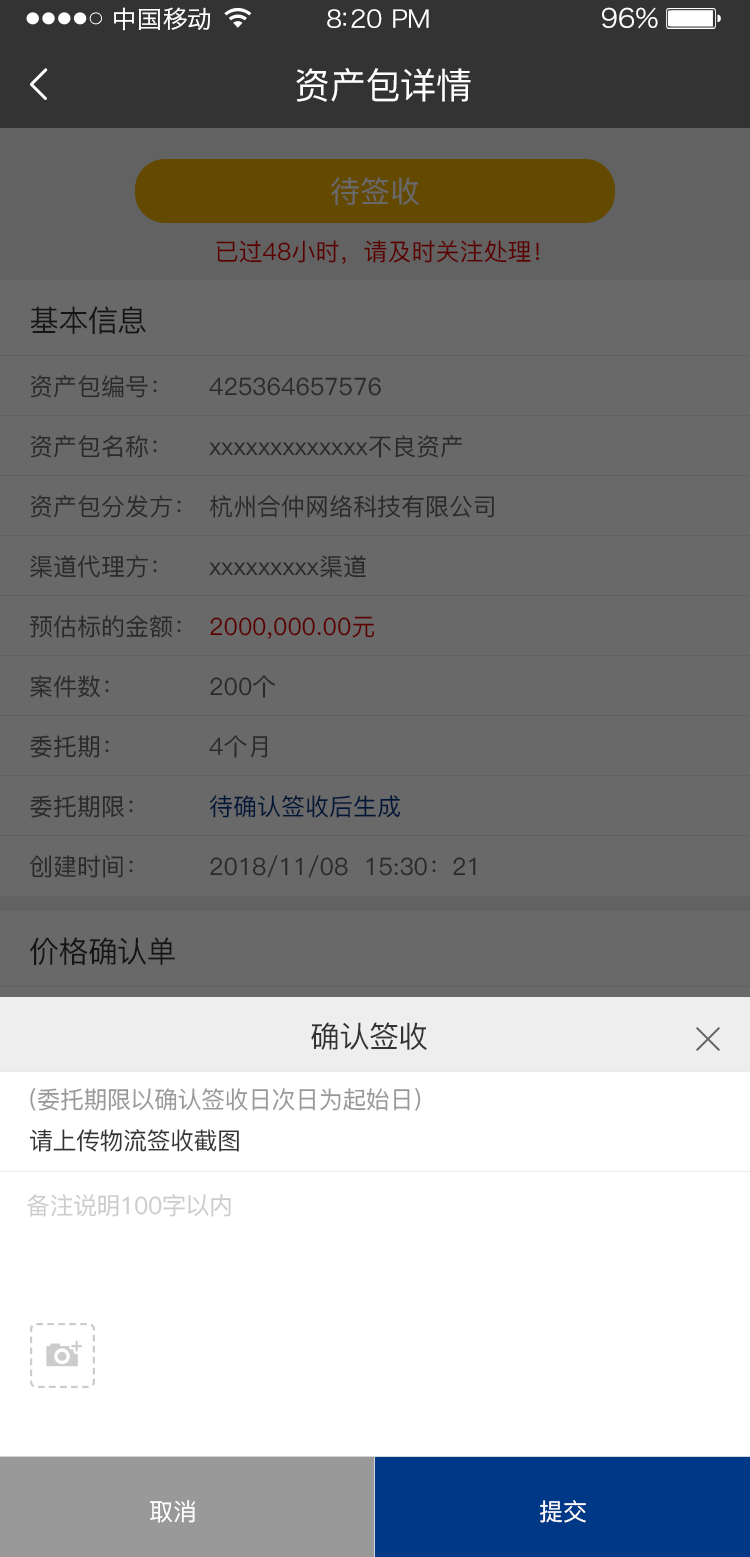
<style>
.page{position:relative;width:750px;height:1557px;background:#696969}
.page>*{position:absolute;margin:0}
.t1{font:24px "HiraginoSansGB-W3";letter-spacing:0.02em;color:#ffffff;scale:1.03 1}
.t2{font:24px "HiraginoSansGB-W3";letter-spacing:-0.02em;color:#ffffff;scale:1.03 1}
.t3{font:26.2px "HiraginoSansGB-W3";letter-spacing:-0.02em;color:#ffffff;scale:1.03 1}
.t4{font:36px "PingFang-SC-Medium";letter-spacing:-0.02em;color:#ffffff}
.t5{font:30px "PingFang-SC-Medium";color:#696969}
.t6{font:24px "PingFang-SC-Medium";color:#5b0000}
.t7{font:30px "PingFang-SC-Medium";letter-spacing:-0.02em;color:#151515}
.t8{font:24px/60px "PingFang-SC-Medium";color:#2a2a2a}
.t9{font:30px "PingFang-SC-Medium";letter-spacing:-0.02em;color:#333333}
.t10{font:24px "PingFang-SC-Medium";letter-spacing:-0.02em;color:#999999}
.t11{font:24px "PingFang-SC-Medium";letter-spacing:-0.02em;color:#333333}
.t12{font:24px "PingFang-SC-Medium";letter-spacing:-0.02em;color:#cccccc}
.t13{font:24px "PingFang-SC-Medium";color:#ffffff}
</style>
<div class="page">
<p class="t1" style="left:114px;top:7px;width:97px;height:24px">中国移动</p>
<p class="t2" style="left:327px;top:9px;width:102px;height:19px">8:20 PM</p>
<p class="t3" style="left:602px;top:7px;width:56px;height:22px">96%</p>
<p class="t4" style="left:296px;top:68px;width:175px;height:34px">资产包详情</p>
<p class="t5" style="left:331px;top:177px;width:88px;height:28px">待签收</p>
<p class="t6" style="left:216px;top:240px;width:324px;height:24px">已过48小时，请及时关注处理！</p>
<p class="t7" style="left:30px;top:306px;width:116px;height:28px">基本信息</p>
<p class="t8" style="left:29px;top:375px;width:152px;height:503px">资产包编号：<br>资产包名称：<br>资产包分发方：<br>渠道代理方：<br>预估标的金额：<br>案件数：<br>委托期：<br>委托期限：<br>创建时间：</p>
<p class="t8" style="left:209px;top:377px;width:285px;height:501px">425364657576<br>xxxxxxxxxxxxx不良资产<br>杭州合仲网络科技有限公司<br>xxxxxxxxx渠道<br>2000,000.00元<br>200个<br>4个月<br>待确认签收后生成<br>2018/11/08  15:30：21</p>
<p class="t7" style="left:30px;top:937px;width:145px;height:28px">价格确认单</p>
<p class="t9" style="left:311px;top:1022px;width:116px;height:28px">确认签收</p>
<p class="t10" style="left:30px;top:1088px;width:391px;height:23px">(委托期限以确认签收日次日为起始日）</p>
<p class="t11" style="left:29px;top:1129px;width:210px;height:23px">请上传物流签收截图</p>
<p class="t12" style="left:27px;top:1194px;width:204px;height:23px">备注说明100字以内</p>
<p class="t13" style="left:150px;top:1500px;width:45px;height:23px">取消</p>
<p class="t13" style="left:540px;top:1500px;width:46px;height:23px">提交</p>
</div>
